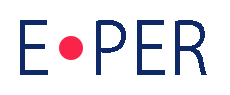
<style>
.page{position:relative;width:230px;height:95px;background:#ffffff}
.page>*{position:absolute;margin:0}
.t1{font:71.8px "KozGoPr6N-Regular";color:#0f2868}
.t2{font:71.7px "KozGoPr6N-Regular";color:#0f2868}
</style>
<div class="page">
<p class="t1" style="left:20px;top:20px;width:28px;height:55px">E</p>
<p class="t2" style="left:96px;top:20px;width:111px;height:55px">PER</p>
</div>
